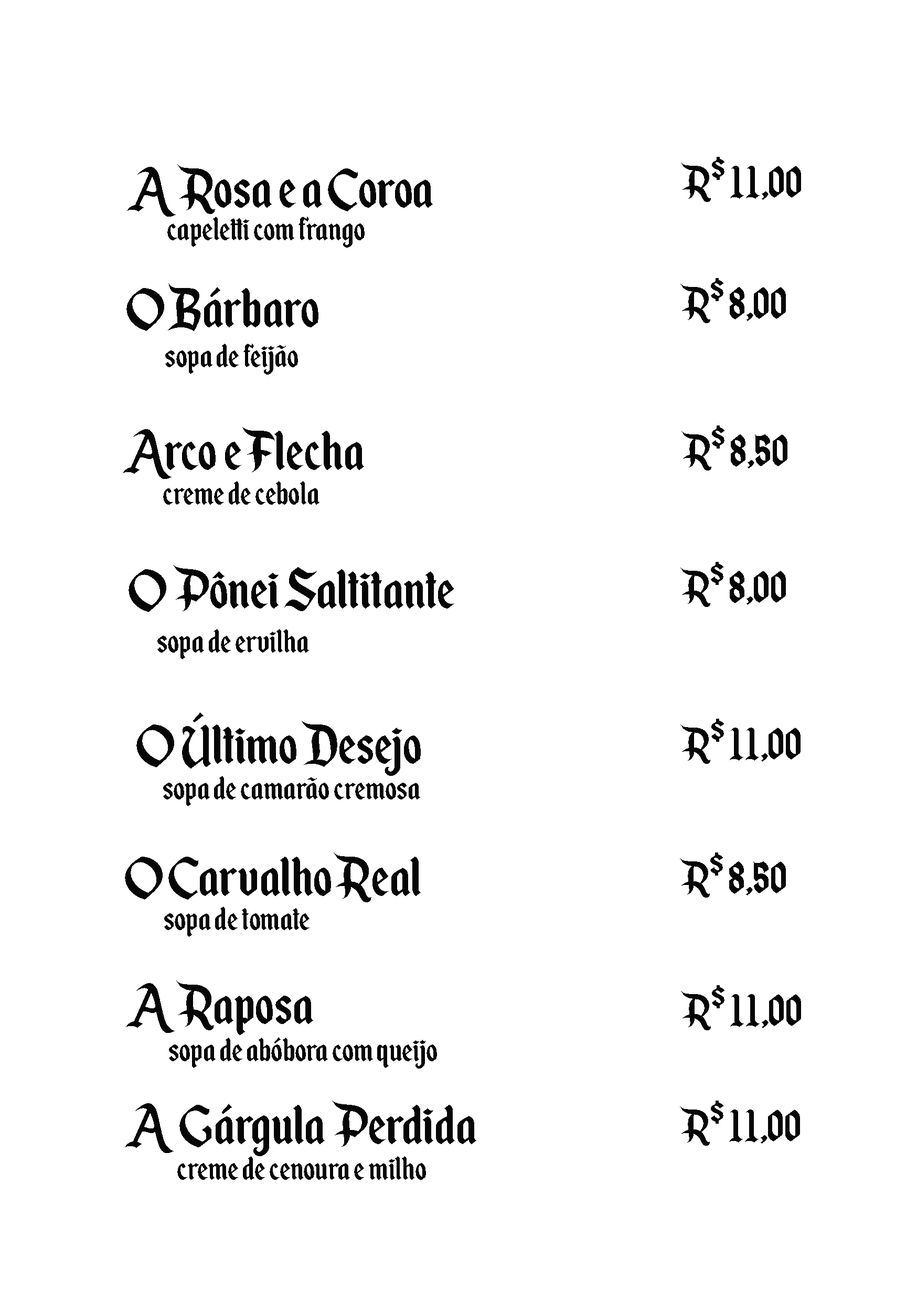
<style>
.page{position:relative;width:917px;height:1301px;background:#ffffff}
.page>*{position:absolute;margin:0}
.t1{font:52.4px "EnchantedLand";color:#070606}
.t2{font:65.6px "EnchantedLand";color:#070606}
.t3{font:39.3px "EnchantedLand";color:#070606}
</style>
<div class="page">
<p class="t1" style="left:681px;top:157px;width:120px;height:45px">R$ 11,00</p>
<p class="t2" style="left:127px;top:164px;width:306px;height:53px">A Rosa e a Coroa</p>
<p class="t3" style="left:167px;top:217px;width:198px;height:31px">capeletti com frango</p>
<p class="t1" style="left:680px;top:278px;width:106px;height:45px">R$ 8,00</p>
<p class="t2" style="left:126px;top:283px;width:192px;height:48px">O Bárbaro</p>
<p class="t3" style="left:165px;top:344px;width:133px;height:30px">sopa de feijão</p>
<p class="t1" style="left:681px;top:425px;width:106px;height:45px">R$ 8,50</p>
<p class="t2" style="left:123px;top:427px;width:241px;height:52px">Arco e Flecha</p>
<p class="t3" style="left:163px;top:481px;width:156px;height:24px">creme de cebola</p>
<p class="t2" style="left:128px;top:565px;width:326px;height:47px">O Pônei Saltitante</p>
<p class="t1" style="left:680px;top:562px;width:106px;height:45px">R$ 8,00</p>
<p class="t3" style="left:157px;top:629px;width:152px;height:30px">sopa de ervilha</p>
<p class="t2" style="left:136px;top:712px;width:285px;height:64px">O Último Desejo</p>
<p class="t1" style="left:680px;top:719px;width:120px;height:45px">R$ 11,00</p>
<p class="t3" style="left:163px;top:776px;width:257px;height:30px">sopa de camarão cremosa</p>
<p class="t2" style="left:125px;top:852px;width:296px;height:50px">O Carvalho Real</p>
<p class="t1" style="left:680px;top:852px;width:106px;height:45px">R$ 8,50</p>
<p class="t3" style="left:164px;top:906px;width:145px;height:31px">sopa de tomate</p>
<p class="t2" style="left:126px;top:980px;width:187px;height:55px">A Raposa</p>
<p class="t1" style="left:681px;top:985px;width:120px;height:45px">R$ 11,00</p>
<p class="t3" style="left:169px;top:1037px;width:268px;height:31px">sopa de abóbora com queijo</p>
<p class="t2" style="left:125px;top:1100px;width:351px;height:56px">A Gárgula Perdida</p>
<p class="t1" style="left:680px;top:1100px;width:120px;height:45px">R$ 11,00</p>
<p class="t3" style="left:177px;top:1156px;width:249px;height:24px">creme de cenoura e milho</p>
</div>
